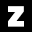
<style>
.page{position:relative;width:32px;height:32px;background:#000000}
.page>*{position:absolute;margin:0}
.t1{font:30px "ProximaNova-Black";color:#ffffff}
</style>
<div class="page">
<p class="t1" style="left:8px;top:6px;width:16px;height:21px">Z</p>
</div>
